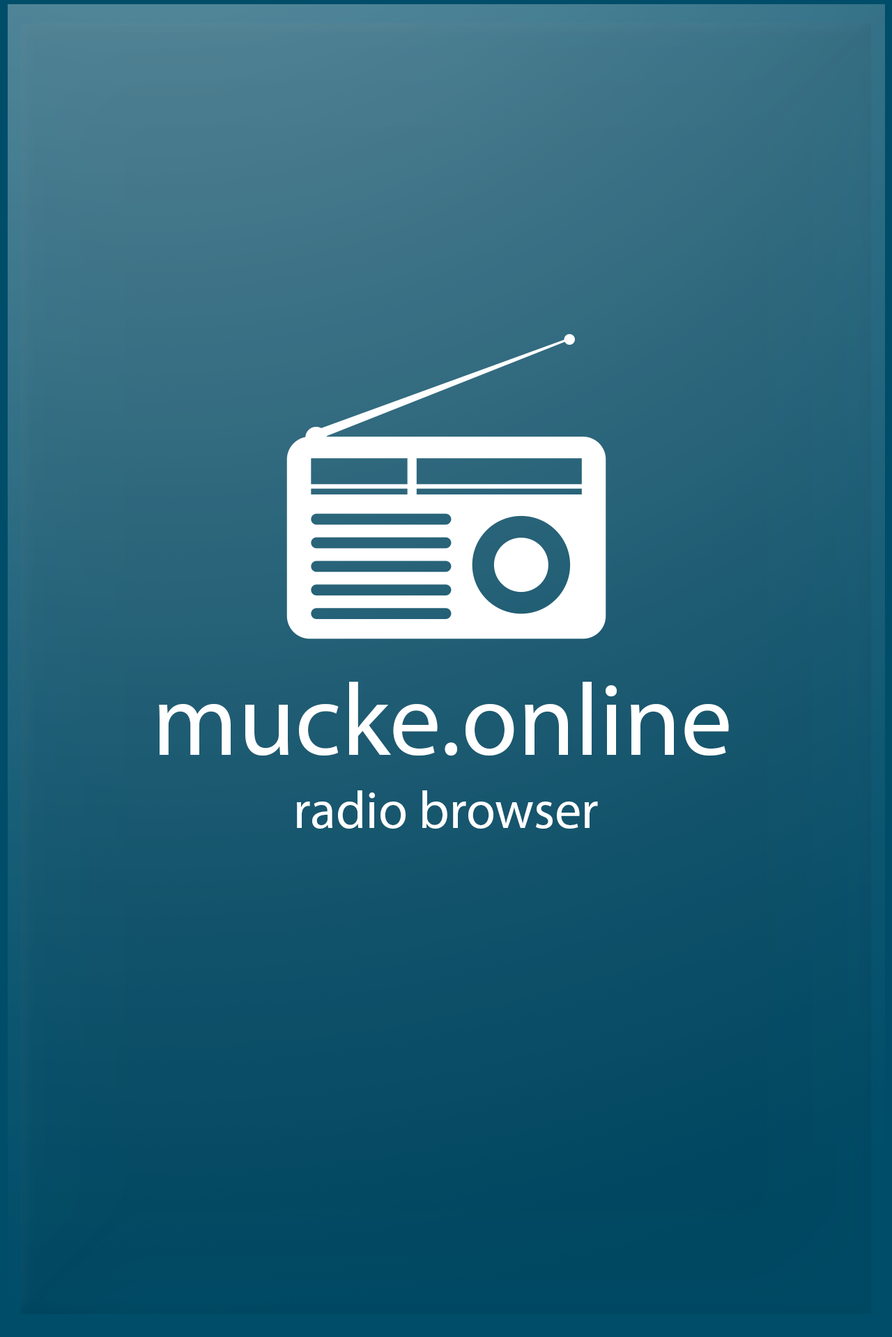
<style>
.page{position:relative;width:892px;height:1337px}
.page>*{position:absolute;margin:0}
.t1{font:103px "MyriadPro-Regular";color:#ffffff}
.t2{font:53.2px "MyriadPro-Regular";color:#ffffff}
</style>
<div class="page">
<p class="t1" style="left:159px;top:682px;width:570px;height:74px">mucke.online</p>
<p class="t2" style="left:297px;top:791px;width:301px;height:38px">radio browser</p>
</div>
